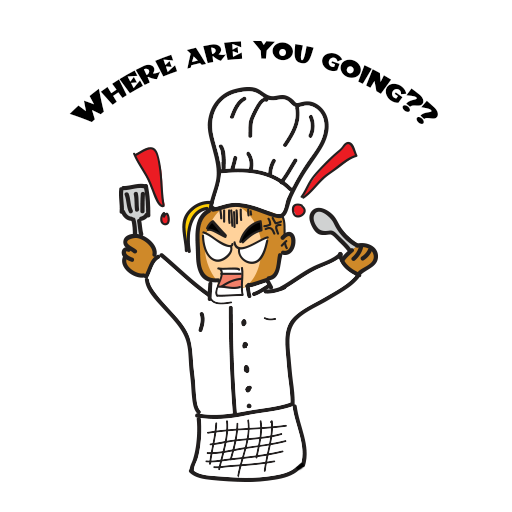
<style>
.page{position:relative;width:512px;height:512px;background:#ffffff}
.page>*{position:absolute;margin:0}
.t1{font:28.2px "BlitzkriegNF";color:#000000}
</style>
<div class="page">
<p class="t1" style="left:69px;top:40px;width:369px;height:84px;text-align:center">Where are you going??</p>
</div>
